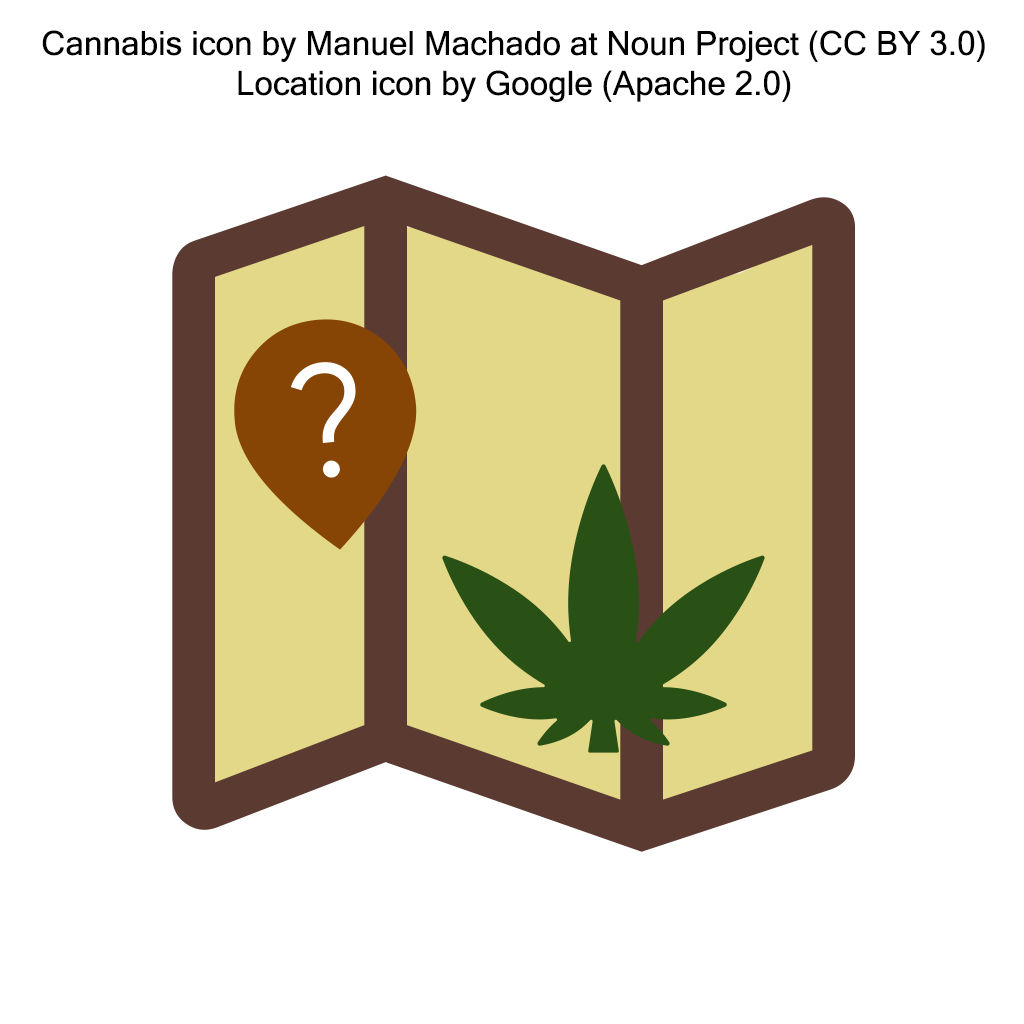
<style>
.page{position:relative;width:1024px;height:1024px;background:#ffffff}
.page>*{position:absolute;margin:0}
.t1{font:33.3px "MicrosoftSansSerif";color:#000000}
</style>
<div class="page">
<p class="t1" style="left:42px;top:30px;width:943px;height:72px;text-align:center">Cannabis icon by Manuel Machado at Noun Project (CC BY 3.0)<br>Location icon by Google (Apache 2.0)</p>
</div>
